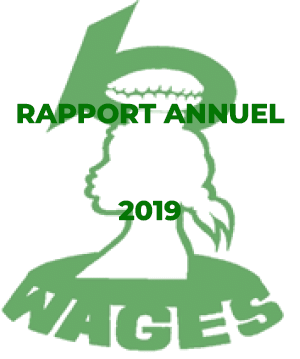
<style>
.page{position:relative;width:300px;height:359px;background:#ffffff}
.page>*{position:absolute;margin:0}
.t1{font:27px "MontserratRoman-ExtraBold";color:#047604}
</style>
<div class="page">
<p class="t1" style="left:17px;top:103px;width:268px;height:118px;text-align:center">RAPPORT ANNUEL<br><br><br>2019</p>
</div>
